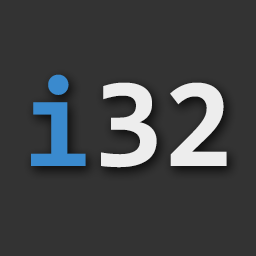
<style>
.page{position:relative;width:256px;height:256px;background:#333333}
.page>*{position:absolute;margin:0}
.t1{font:128px "Consolas-Bold";color:#ededed}
.t2{font:128px "Consolas-Bold";color:#3a8ace}
</style>
<div class="page">
<p class="t1" style="left:31px;top:74px;width:196px;height:94px"><span class="t2">i</span>32</p>
</div>
